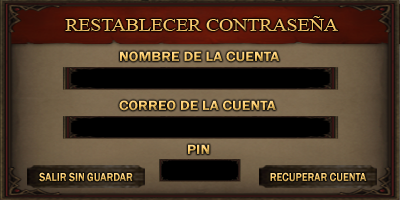
<style>
.page{position:relative;width:400px;height:200px}
.page>*{position:absolute;margin:0}
.t1{font:18px "TimesNewRomanPSMT";color:#f7c868;scale:1.09 1}
.t2{font:14.1px "FranklinGothic-Demi";scale:1.07 1}
.t3{font:12px "FranklinGothic-Demi";scale:0.86 1}
</style>
<div class="page">
<p class="t1" style="left:65px;top:16px;width:273px;height:15px">RESTABLECER CONTRASEÑA</p>
<p class="t2" style="left:120px;top:51px;width:160px;height:11px">NOMBRE DE LA CUENTA</p>
<p class="t2" style="left:119px;top:100px;width:157px;height:11px">CORREO DE LA CUENTA</p>
<p class="t2" style="left:188px;top:144px;width:22px;height:10px">PIN</p>
<p class="t3" style="left:39px;top:172px;width:94px;height:10px">SALIR SIN GUARDAR</p>
<p class="t3" style="left:270px;top:172px;width:97px;height:10px">RECUPERAR CUENTA</p>
</div>
